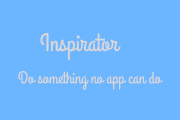
<style>
.page{position:relative;width:180px;height:120px;background:#6cb5ff}
.page>*{position:absolute;margin:0}
.t1{font:25px "GrandHotel-Regular";color:#dad7d7}
.t2{font:16.7px "GrandHotel-Regular";color:#dad7d7}
</style>
<div class="page">
<p class="t1" style="left:40px;top:33px;width:81px;height:28px">Inspirator</p>
<p class="t2" style="left:18px;top:71px;width:145px;height:19px">Do something no app can do</p>
</div>
